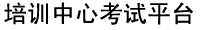
<style>
.page{position:relative;width:200px;height:30px;background:#ffffff}
.page>*{position:absolute;margin:0}
.t1{font:24px "SimHei";color:#000000}
</style>
<div class="page">
<p class="t1" style="left:4px;top:2px;width:189px;height:23px">培训中心考试平台</p>
</div>
